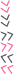
<style>
.page{position:relative;width:14px;height:75px;background:#ffffff}
.page>*{position:absolute;margin:0}
.t1{font:16px "ThrowMyHandsUpintheAir";color:#fd6aa1;text-transform:uppercase}
.t2{font:16px "ThrowMyHandsUpintheAir";color:#545b63;text-transform:uppercase}
</style>
<div class="page">
<p class="t1" style="left:0px;top:0px;width:10px;height:13px;rotate:90deg">&gt;&gt;</p>
<p class="t2" style="left:0px;top:14px;width:10px;height:13px;rotate:90deg">&gt;&gt;</p>
<p class="t2" style="left:0px;top:31px;width:14px;height:10px">&gt;&gt;</p>
<p class="t2" style="left:0px;top:54px;width:14px;height:9px;rotate:-180deg">&gt;&gt;</p>
<p class="t1" style="left:0px;top:42px;width:14px;height:10px">&gt;&gt;</p>
<p class="t1" style="left:0px;top:65px;width:14px;height:9px;rotate:-180deg">&gt;&gt;</p>
</div>
